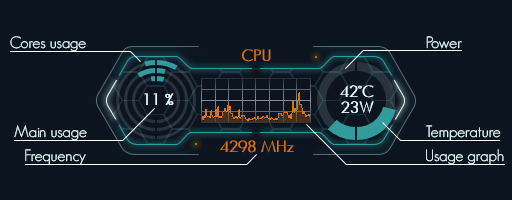
<style>
.page{position:relative;width:512px;height:200px;background:#0c141f}
.page>*{position:absolute;margin:0}
.t1{font:16px "GeosansLight";color:#e6ffff}
</style>
<div class="page">
<p class="t1" style="left:10px;top:36px;width:76px;height:16px">Cores usage</p>
<p class="t1" style="left:426px;top:36px;width:36px;height:13px">Power</p>
<p class="t1" style="left:14px;top:125px;width:73px;height:16px">Main usage</p>
<p class="t1" style="left:426px;top:125px;width:75px;height:16px">Temperature</p>
<p class="t1" style="left:25px;top:149px;width:61px;height:16px">Frequency</p>
<p class="t1" style="left:426px;top:149px;width:78px;height:16px">Usage graph</p>
</div>
